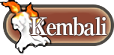
<style>
.page{position:relative;width:114px;height:55px;background:#ffffff}
.page>*{position:absolute;margin:0}
.t1{font:24px "RyuminPro-ExBold";letter-spacing:-0.08em;color:#ffffff;scale:0.93 1}
</style>
<div class="page">
<p class="t1" style="left:30px;top:17px;width:77px;height:19px">Kembali</p>
</div>
